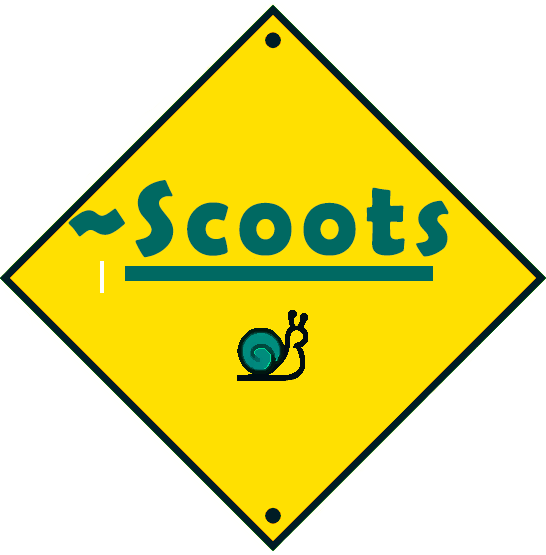
<style>
.page{position:relative;width:546px;height:555px;background:#ffffff}
.page>*{position:absolute;margin:0}
.t1{font:105.3px "BerlinSansFBDemi-Bold";letter-spacing:0.08em;color:#006962}
</style>
<div class="page">
<p class="t1" style="left:68px;top:180px;width:381px;height:78px">~Scoots</p>
</div>
